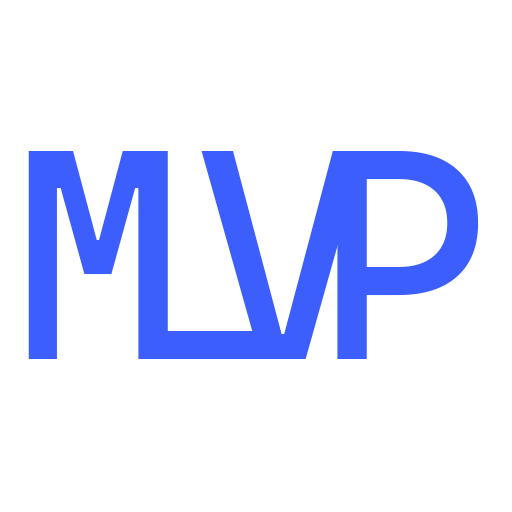
<style>
.page{position:relative;width:512px;height:512px;background:#ffffff}
.page>*{position:absolute;margin:0}
.t1{font:300px "CascadiaMono-Regular";color:#3b5efd}
</style>
<div class="page">
<p class="t1" style="left:28px;top:151px;width:140px;height:208px">M</p>
<p class="t1" style="left:138px;top:151px;width:139px;height:208px">L</p>
<p class="t1" style="left:201px;top:151px;width:164px;height:208px">V</p>
<p class="t1" style="left:337px;top:151px;width:142px;height:208px">P</p>
</div>
